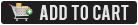
<style>
.page{position:relative;width:138px;height:25px;background:#1f1f1f}
.page>*{position:absolute;margin:0}
.t1{font:17px "Bebas";letter-spacing:0.01em;color:#e6e6e6}
</style>
<div class="page">
<p class="t1" style="left:39px;top:5px;width:90px;height:15px">ADD  TO  CART</p>
</div>
